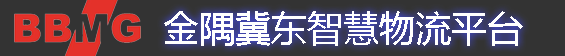
<style>
.page{position:relative;width:565px;height:56px;background:#333333}
.page>*{position:absolute;margin:0}
.t1{font:36px "MicrosoftYaHei";color:#ffffff}
</style>
<div class="page">
<p class="t1" style="left:164px;top:11px;width:359px;height:35px">金隅冀东智慧物流平台</p>
</div>
